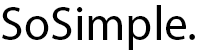
<style>
.page{position:relative;width:200px;height:50px;background:#ffffff}
.page>*{position:absolute;margin:0}
.t1{font:48px "MyriadPro-Regular";color:#000000}
</style>
<div class="page">
<p class="t1" style="left:2px;top:5px;width:193px;height:45px">SoSimple.</p>
</div>
